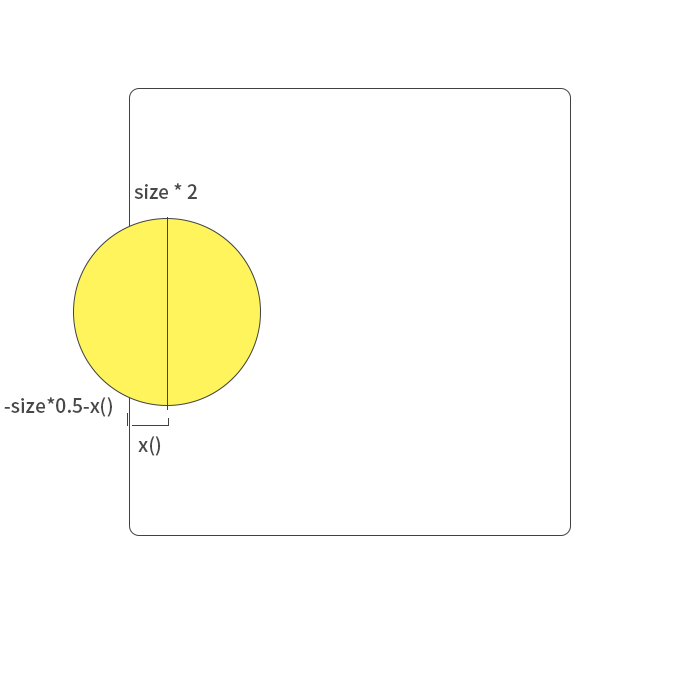
<style>
.page{position:relative;width:700px;height:700px;background:#ffffff}
.page>*{position:absolute;margin:0}
.t1{font:19.2px "SourceHanSansCN-Medium";color:#484848}
</style>
<div class="page">
<p class="t1" style="left:134px;top:183px;width:63px;height:16px">size * 2</p>
<p class="t1" style="left:4px;top:397px;width:108px;height:20px">-size*0.5-x()</p>
<p class="t1" style="left:138px;top:436px;width:23px;height:20px">x()</p>
</div>
